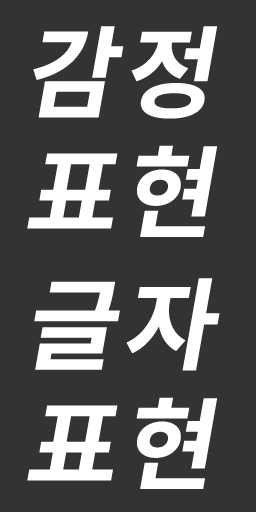
<style>
.page{position:relative;width:256px;height:512px;background:#333333}
.page>*{position:absolute;margin:0}
.t1{font:100px/120px "NotoSansKR-Bold";letter-spacing:0.06em;color:#ffffff;font-style:italic}
</style>
<div class="page">
<p class="t1" style="left:27px;top:26px;width:191px;height:211px">감정<br>표현</p>
<p class="t1" style="left:27px;top:278px;width:193px;height:211px">글자<br>표현</p>
</div>
